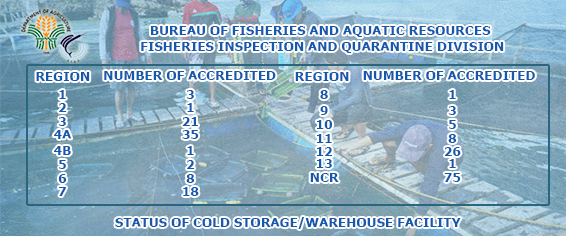
<style>
.page{position:relative;width:566px;height:236px}
.page>*{position:absolute;margin:0}
.t1{font:13.3px "Tahoma-Bold";color:#1559ad}
</style>
<div class="page">
<p class="t1" style="left:141px;top:26px;width:363px;height:27px;text-align:center">BUREAU OF FISHERIES AND AQUATIC RESOURCES <br>FISHERIES INSPECTION AND QUARANTINE DIVISION</p>
<p class="t1" style="left:36px;top:72px;width:54px;height:9px">REGION</p>
<p class="t1" style="left:104px;top:71px;width:172px;height:9px">NUMBER OF ACCREDITED</p>
<p class="t1" style="left:295px;top:72px;width:54px;height:9px">REGION</p>
<p class="t1" style="left:363px;top:71px;width:172px;height:9px">NUMBER OF ACCREDITED</p>
<p class="t1" style="left:59px;top:90px;width:7px;height:9px">1</p>
<p class="t1" style="left:186px;top:90px;width:8px;height:9px">3</p>
<p class="t1" style="left:320px;top:90px;width:8px;height:9px">8</p>
<p class="t1" style="left:449px;top:90px;width:7px;height:9px">1</p>
<p class="t1" style="left:59px;top:103px;width:8px;height:9px">2</p>
<p class="t1" style="left:187px;top:103px;width:7px;height:9px">1</p>
<p class="t1" style="left:320px;top:106px;width:8px;height:9px">9</p>
<p class="t1" style="left:448px;top:106px;width:8px;height:9px">3</p>
<p class="t1" style="left:58px;top:117px;width:8px;height:9px">3</p>
<p class="t1" style="left:182px;top:117px;width:16px;height:9px">21</p>
<p class="t1" style="left:317px;top:120px;width:15px;height:9px">10</p>
<p class="t1" style="left:449px;top:120px;width:7px;height:9px">5</p>
<p class="t1" style="left:54px;top:130px;width:18px;height:9px">4A</p>
<p class="t1" style="left:182px;top:130px;width:17px;height:9px">35</p>
<p class="t1" style="left:317px;top:134px;width:15px;height:9px">11</p>
<p class="t1" style="left:448px;top:134px;width:9px;height:9px">8</p>
<p class="t1" style="left:54px;top:146px;width:17px;height:9px">4B</p>
<p class="t1" style="left:187px;top:146px;width:7px;height:9px">1</p>
<p class="t1" style="left:317px;top:147px;width:16px;height:9px">12</p>
<p class="t1" style="left:444px;top:147px;width:17px;height:9px">26</p>
<p class="t1" style="left:59px;top:160px;width:7px;height:9px">5</p>
<p class="t1" style="left:187px;top:160px;width:8px;height:9px">2</p>
<p class="t1" style="left:317px;top:159px;width:15px;height:9px">13</p>
<p class="t1" style="left:449px;top:159px;width:7px;height:9px">1</p>
<p class="t1" style="left:58px;top:174px;width:9px;height:9px">6</p>
<p class="t1" style="left:186px;top:174px;width:9px;height:9px">8</p>
<p class="t1" style="left:310px;top:173px;width:29px;height:9px">NCR</p>
<p class="t1" style="left:444px;top:173px;width:17px;height:9px">75</p>
<p class="t1" style="left:59px;top:187px;width:7px;height:9px">7</p>
<p class="t1" style="left:183px;top:187px;width:16px;height:9px">18</p>
<p class="t1" style="left:115px;top:217px;width:346px;height:12px">STATUS OF COLD STORAGE/WAREHOUSE FACILITY</p>
</div>
